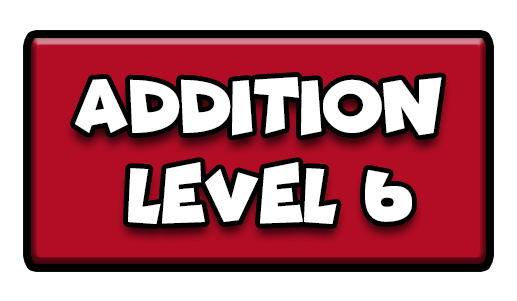
<style>
.page{position:relative;width:517px;height:301px;background:#ffffff}
.page>*{position:absolute;margin:0}
.t1{font:77.7px "Funhouse";color:#ffffff;scale:0.95 1}
</style>
<div class="page">
<p class="t1" style="left:75px;top:77px;width:367px;height:59px">ADDITION</p>
<p class="t1" style="left:128px;top:162px;width:284px;height:62px">LEVEL 6</p>
</div>
